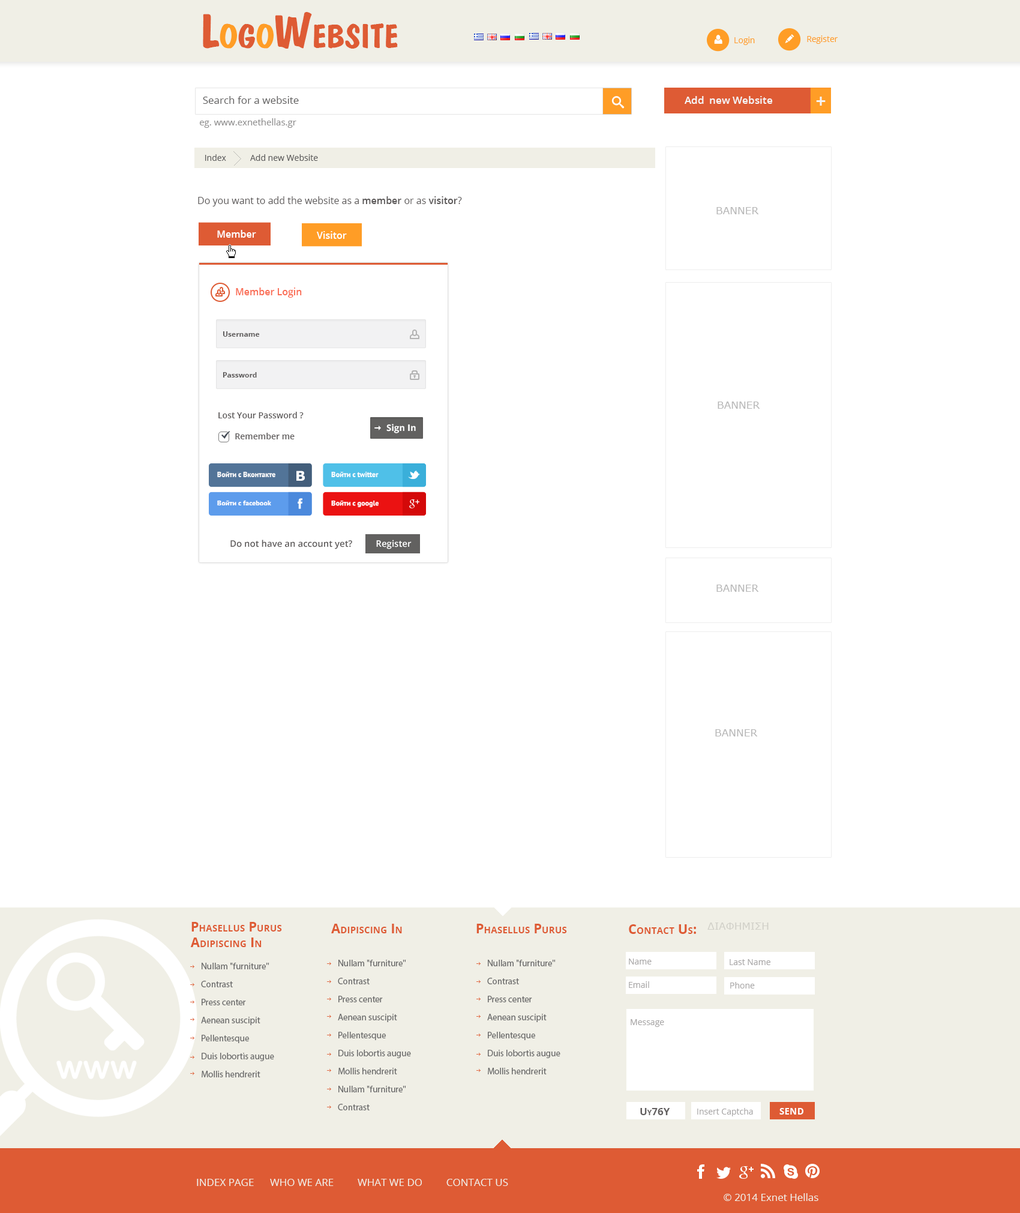
<style>
.page{position:relative;width:1020px;height:1213px;background:#ffffff}
.page>*{position:absolute;margin:0}
.t1{font:48px "DomkratBold";color:#de5b34;font-variant:small-caps}
.t2{font:48px "DomkratBold";color:#ff9d26;font-variant:small-caps}
.t3{font:8.4px "OpenSans";color:#ff9d26}
.t4{font:10.2px "OpenSans";color:#5e5d5d}
.t5{font:10.2px "OpenSans-Semibold";color:#f5f5f5}
.t6{font:13.2px "Verdana-Bold";color:#f5f5f5}
.t7{font:9px "OpenSans";color:#919090}
.t8{font:8.4px "OpenSans";color:#5e5d5d}
.t9{font:9.6px "OpenSans";color:#5c5959}
.t10{font:9.6px "OpenSans-Semibold";color:#5c5959}
.t11{font:10.2px "Verdana";color:#b8b8b8;text-transform:uppercase}
.t12{font:9.6px "OpenSans-Semibold";color:#ffffff}
.t13{font:9.6px "OpenSans-Semibold";color:#fa6f57}
.t14{font:7.2px "OpenSans-Bold";color:#5e5b5b}
.t15{font:8.4px "OpenSans-Semibold";color:#5e5b5b}
.t16{font:9px "OpenSans-Bold";color:#ffffff}
.t17{font:7.3px "PTSans-Bold";color:#ffffff}
.t18{font:13.6px "Verdana-Bold";color:#ffffff}
.t19{font:8.4px "ArialMT";color:#ffffff}
.t20{font:9px "OpenSans-Semibold";color:#5e5b5b}
.t21{font:9px "OpenSans-Semibold";color:#ffffff}
.t22{font:13.2px "OpenSans-Bold";color:#de5b34;font-variant:small-caps}
.t23{font:10.2px "Verdana";color:#d2d1c9;text-transform:uppercase}
.t24{font:9px/18px "MyriadPro-Regular";color:#6b6b6b}
.t25{font:8.4px "OpenSans";color:#a9a7a7}
.t26{font:10.2px "OpenSans-Bold";color:#625f5f;font-variant:small-caps}
.t27{font:13.2px "OpenSans-Bold";color:#ffffff;font-variant:small-caps}
.t28{font:10.2px "OpenSans";color:#f0efe6}
</style>
<div class="page">
<p class="t1" style="left:203px;top:12px;width:195px;height:37px">L<span class="t2">o</span>g<span class="t2">o</span>Website</p>
<p class="t3" style="left:734px;top:37px;width:21px;height:8px">Login</p>
<p class="t3" style="left:807px;top:35px;width:31px;height:9px">Register</p>
<p class="t4" style="left:203px;top:96px;width:96px;height:8px">Search for a website</p>
<p class="t5" style="left:685px;top:96px;width:88px;height:8px">Add  new Website</p>
<p class="t6" style="left:816px;top:97px;width:10px;height:9px">+</p>
<p class="t7" style="left:200px;top:118px;width:96px;height:10px">eg. www.exnethellas.gr</p>
<p class="t8" style="left:205px;top:154px;width:113px;height:7px">Index           Add new Website</p>
<p class="t9" style="left:198px;top:196px;width:264px;height:10px">Do you want to add the website as a<span class="t10"> member</span> or as <span class="t10">visitor</span>?</p>
<p class="t11" style="left:716px;top:207px;width:43px;height:7px">BANNER</p>
<p class="t12" style="left:217px;top:230px;width:39px;height:8px">Member</p>
<p class="t12" style="left:317px;top:231px;width:30px;height:8px">Visitor</p>
<p class="t13" style="left:236px;top:287px;width:66px;height:11px">Member Login</p>
<p class="t14" style="left:223px;top:331px;width:37px;height:6px">Username</p>
<p class="t14" style="left:223px;top:372px;width:34px;height:5px">Password</p>
<p class="t11" style="left:718px;top:401px;width:42px;height:8px">BANNER</p>
<p class="t15" style="left:218px;top:412px;width:86px;height:6px">Lost Your Password ?</p>
<p class="t16" style="left:386px;top:424px;width:30px;height:9px">Sign In</p>
<p class="t15" style="left:235px;top:433px;width:60px;height:6px">Remember me</p>
<p class="t17" style="left:217px;top:472px;width:58px;height:5px">Войти с Вконтакте</p>
<p class="t18" style="left:296px;top:470px;width:9px;height:11px">В</p>
<p class="t17" style="left:331px;top:472px;width:48px;height:5px">Войти с twitter</p>
<p class="t17" style="left:217px;top:500px;width:54px;height:5px">Войти с facebook</p>
<p class="t17" style="left:331px;top:500px;width:48px;height:7px">Войти с google</p>
<p class="t19" style="left:415px;top:499px;width:4px;height:5px">+</p>
<p class="t20" style="left:230px;top:539px;width:182px;height:10px">Do not have an account yet?          <span class="t21">Register</span></p>
<p class="t11" style="left:716px;top:584px;width:43px;height:8px">BANNER</p>
<p class="t11" style="left:715px;top:729px;width:43px;height:7px">BANNER</p>
<p class="t22" style="left:190px;top:922px;width:92px;height:25px">Phasellus Purus <br> Adipiscing In</p>
<p class="t22" style="left:331px;top:923px;width:71px;height:10px">Adipiscing In</p>
<p class="t22" style="left:476px;top:923px;width:91px;height:10px">Phasellus Purus</p>
<p class="t22" style="left:629px;top:924px;width:67px;height:10px">Contact Us:</p>
<p class="t23" style="left:707px;top:922px;width:62px;height:7px">ΔΙΑΦΗΜΙΣΗ</p>
<p class="t24" style="left:201px;top:962px;width:73px;height:115px">Nullam "furniture"<br>Contrast<br>Press center<br>Aenean suscipit<br>Pellentesque<br>Duis lobortis augue <br>Mollis hendrerit</p>
<p class="t24" style="left:338px;top:959px;width:73px;height:151px">Nullam "furniture"<br>Contrast<br>Press center<br>Aenean suscipit<br>Pellentesque<br>Duis lobortis augue <br>Mollis hendrerit<br>Nullam "furniture"<br>Contrast</p>
<p class="t24" style="left:487px;top:959px;width:73px;height:115px">Nullam "furniture"<br>Contrast<br>Press center<br>Aenean suscipit<br>Pellentesque<br>Duis lobortis augue <br>Mollis hendrerit</p>
<p class="t25" style="left:629px;top:958px;width:23px;height:6px">Name</p>
<p class="t25" style="left:730px;top:959px;width:40px;height:6px">Last Name</p>
<p class="t25" style="left:629px;top:981px;width:20px;height:7px">Email</p>
<p class="t25" style="left:730px;top:982px;width:25px;height:6px">Phone</p>
<p class="t25" style="left:631px;top:1019px;width:33px;height:8px">Message</p>
<p class="t26" style="left:640px;top:1108px;width:30px;height:7px">Uy76Y</p>
<p class="t25" style="left:697px;top:1108px;width:56px;height:8px">Insert Captcha</p>
<p class="t27" style="left:779px;top:1108px;width:24px;height:6px">send</p>
<p class="t28" style="left:197px;top:1178px;width:311px;height:8px">INDEX PAGE      WHO WE ARE         WHAT WE DO         CONTACT US</p>
<p class="t28" style="left:724px;top:1193px;width:94px;height:8px">© 2014 Exnet Hellas</p>
</div>
